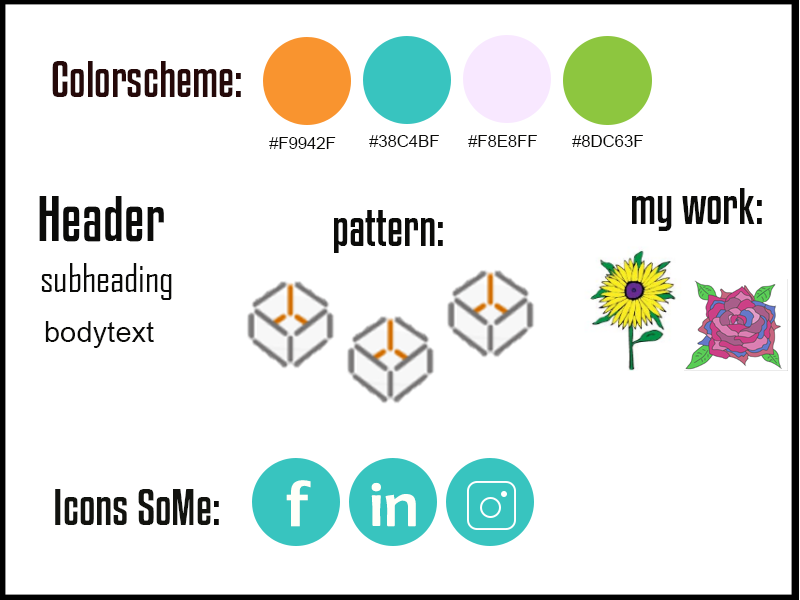
<style>
.page{position:relative;width:800px;height:600px;background:#ffffff}
.page>*{position:absolute;margin:0}
.t1{font:45.8px "KenyanCoffeeRg-Regular";color:#250909}
.t2{font:16.7px "ArialMT";color:#0b0b09}
.t3{font:58.3px "KenyanCoffeeRg-Regular";color:#0b0b09}
.t4{font:45.8px "KenyanCoffeeRg-Regular";color:#0b0b09}
.t5{font:37.5px "AgencyFB-Reg";color:#0b0b09}
.t6{font:29.2px "ArialMT";color:#0b0b09}
.t7{font:58.3px "LucidaSans-Demi";color:#fffff8}
.t8{font:66.7px "BerlinSansFB-Reg";color:#fffff8}
.t9{font:45.8px "KenyanCoffeeRg-Regular";color:#12130f}
</style>
<div class="page">
<p class="t1" style="left:52px;top:61px;width:189px;height:36px">Colorscheme:</p>
<p class="t2" style="left:269px;top:137px;width:67px;height:12px">#F9942F</p>
<p class="t2" style="left:369px;top:135px;width:70px;height:12px">#38C4BF</p>
<p class="t2" style="left:468px;top:135px;width:69px;height:12px">#F8E8FF</p>
<p class="t2" style="left:572px;top:135px;width:71px;height:12px">#8DC63F</p>
<p class="t3" style="left:39px;top:196px;width:125px;height:46px">Header</p>
<p class="t4" style="left:632px;top:188px;width:130px;height:43px">my work:</p>
<p class="t4" style="left:334px;top:210px;width:109px;height:43px">pattern:</p>
<p class="t5" style="left:41px;top:263px;width:131px;height:37px">subheading</p>
<p class="t6" style="left:45px;top:321px;width:109px;height:27px">bodytext</p>
<p class="t7" style="left:286px;top:480px;width:25px;height:47px">f</p>
<p class="t8" style="left:371px;top:482px;width:45px;height:45px">in</p>
<p class="t9" style="left:55px;top:489px;width:164px;height:36px">Icons SoMe<span class="t4">:</span></p>
</div>
